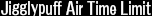
<style>
.page{position:relative;width:152px;height:16px;background:#000000}
.page>*{position:absolute;margin:0}
.t1{font:17.3px "FolkPro-Bold";color:#ffffff;scale:0.68 1}
.t2{font:16.2px "FolkPro-Bold";color:#ffffff;scale:0.72 1}
</style>
<div class="page">
<p class="t1" style="left:1px;top:1px;width:150px;height:17px">Jigglypuff Air Time Limit</p>
<p class="t2" style="left:12px;top:3px;width:15px;height:13px">gg</p>
<p class="t1" style="left:31px;top:4px;width:14px;height:12px">yp</p>
</div>
